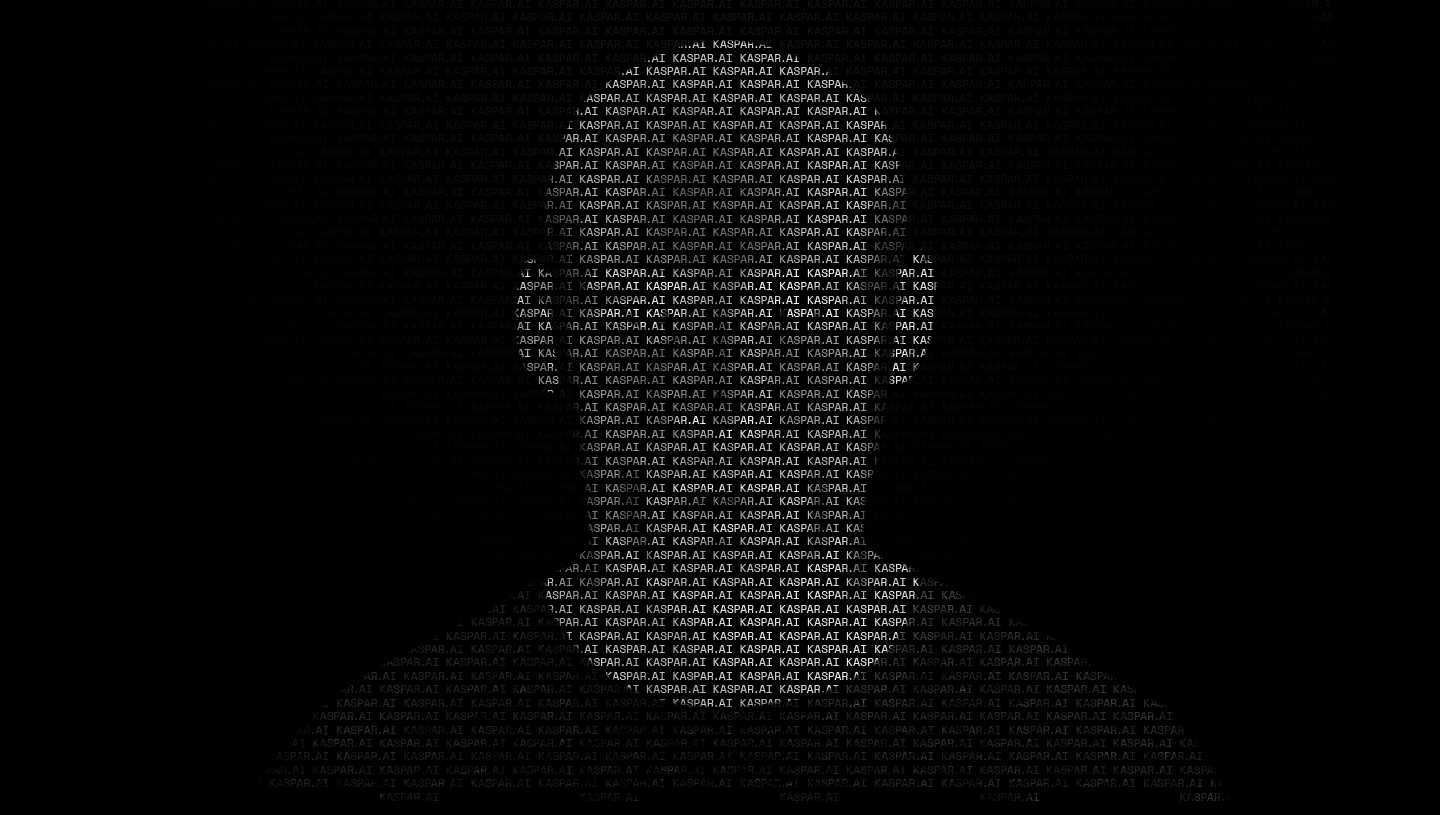
<style>
.page{position:relative;width:1440px;height:815px;background:#000000}
.page>*{position:absolute;margin:0}
.t1{font:11.2px "SpaceMono-Regular";color:#050505;text-transform:uppercase}
</style>
<div class="page">
<p class="t1" style="left:0px;top:0px;width:1440px;height:801px;text-align:justify">Kaspar.ai Kaspar.ai Kaspar.ai Kaspar.ai Kaspar.ai Kaspar.ai Kaspar.ai Kaspar.ai Kaspar.ai Kaspar.ai Kaspar.ai Kaspar.ai Kaspar.ai Kaspar.ai Kaspar.ai Kaspar.ai Kaspar.ai Kaspar.ai Kaspar.ai Kaspar.ai Kaspar.ai Kaspar.ai Kaspar.ai Kaspar.ai Kaspar.ai Kaspar.ai Kaspar.ai Kaspar.ai Kaspar.ai Kaspar.ai Kaspar.ai Kaspar.ai Kaspar.ai Kaspar.ai Kaspar.ai Kaspar.ai Kaspar.ai Kaspar.ai Kaspar.ai Kaspar.ai Kaspar.ai Kaspar.ai Kaspar.ai Kaspar.ai Kaspar.ai Kaspar.ai Kaspar.ai Kaspar.ai Kaspar.ai Kaspar.ai Kaspar.ai Kaspar.ai Kaspar.ai Kaspar.ai Kaspar.ai Kaspar.ai Kaspar.ai Kaspar.ai Kaspar.ai Kaspar.ai Kaspar.ai Kaspar.ai Kaspar.ai Kaspar.ai Kaspar.ai Kaspar.ai Kaspar.ai Kaspar.ai Kaspar.ai Kaspar.ai Kaspar.ai Kaspar.ai Kaspar.ai Kaspar.ai Kaspar.ai Kaspar.ai Kaspar.ai Kaspar.ai Kaspar.ai Kaspar.ai Kaspar.ai Kaspar.ai Kaspar.ai Kaspar.ai Kaspar.ai Kaspar.ai Kaspar.ai Kaspar.ai Kaspar.ai Kaspar.ai Kaspar.ai Kaspar.ai Kaspar.ai Kaspar.ai Kaspar.ai Kaspar.ai Kaspar.ai Kaspar.ai Kaspar.ai Kaspar.ai Kaspar.ai Kaspar.ai Kaspar.ai Kaspar.ai Kaspar.ai Kaspar.ai Kaspar.ai Kaspar.ai Kaspar.ai Kaspar.ai Kaspar.ai Kaspar.ai Kaspar.ai Kaspar.ai Kaspar.ai Kaspar.ai Kaspar.ai Kaspar.ai Kaspar.ai Kaspar.ai Kaspar.ai Kaspar.ai Kaspar.ai Kaspar.ai Kaspar.ai Kaspar.ai Kaspar.ai Kaspar.ai Kaspar.ai Kaspar.ai Kaspar.ai Kaspar.ai Kaspar.ai Kaspar.ai Kaspar.ai Kaspar.ai Kaspar.ai Kaspar.ai Kaspar.ai Kaspar.ai Kaspar.ai Kaspar.ai Kaspar.ai Kaspar.ai Kaspar.ai Kaspar.ai Kaspar.ai Kaspar.ai Kaspar.ai Kaspar.ai Kaspar.ai Kaspar.ai Kaspar.ai Kaspar.ai Kaspar.ai Kaspar.ai Kaspar.ai Kaspar.ai Kaspar.ai Kaspar.ai Kaspar.ai Kaspar.ai Kaspar.ai Kaspar.ai Kaspar.ai Kaspar.ai Kaspar.ai Kaspar.ai Kaspar.ai Kaspar.ai Kaspar.ai Kaspar.ai Kaspar.ai Kaspar.ai Kaspar.ai Kaspar.ai Kaspar.ai Kaspar.ai Kaspar.ai Kaspar.ai Kaspar.ai Kaspar.ai Kaspar.ai Kaspar.ai Kaspar.ai Kaspar.ai Kaspar.ai Kaspar.ai Kaspar.ai Kaspar.ai Kaspar.ai Kaspar.ai Kaspar.ai Kaspar.ai Kaspar.ai Kaspar.ai Kaspar.ai Kaspar.ai Kaspar.ai Kaspar.ai Kaspar.ai Kaspar.ai Kaspar.ai Kaspar.ai Kaspar.ai Kaspar.ai Kaspar.ai Kaspar.ai Kaspar.ai Kaspar.ai Kaspar.ai Kaspar.ai Kaspar.ai Kaspar.ai Kaspar.ai Kaspar.ai Kaspar.ai Kaspar.ai Kaspar.ai Kaspar.ai Kaspar.ai Kaspar.ai Kaspar.ai Kaspar.ai Kaspar.ai Kaspar.ai Kaspar.ai Kaspar.ai Kaspar.ai Kaspar.ai Kaspar.ai Kaspar.ai Kaspar.ai Kaspar.ai Kaspar.ai Kaspar.ai Kaspar.ai Kaspar.ai Kaspar.ai Kaspar.ai Kaspar.ai Kaspar.ai Kaspar.ai Kaspar.ai Kaspar.ai Kaspar.ai Kaspar.ai Kaspar.ai Kaspar.ai Kaspar.ai Kaspar.ai Kaspar.ai Kaspar.ai Kaspar.ai Kaspar.ai Kaspar.ai Kaspar.ai Kaspar.ai Kaspar.ai Kaspar.ai Kaspar.ai Kaspar.ai Kaspar.ai Kaspar.ai Kaspar.ai Kaspar.ai Kaspar.ai Kaspar.ai Kaspar.ai Kaspar.ai Kaspar.ai Kaspar.ai Kaspar.ai Kaspar.ai Kaspar.ai Kaspar.ai Kaspar.ai Kaspar.ai Kaspar.ai Kaspar.ai Kaspar.ai Kaspar.ai Kaspar.ai Kaspar.ai Kaspar.ai Kaspar.ai Kaspar.ai Kaspar.ai Kaspar.ai Kaspar.ai Kaspar.ai Kaspar.ai Kaspar.ai Kaspar.ai Kaspar.ai Kaspar.ai Kaspar.ai Kaspar.ai Kaspar.ai Kaspar.ai Kaspar.ai Kaspar.ai Kaspar.ai Kaspar.ai Kaspar.ai Kaspar.ai Kaspar.ai Kaspar.ai Kaspar.ai Kaspar.ai Kaspar.ai Kaspar.ai Kaspar.ai Kaspar.ai Kaspar.ai Kaspar.ai Kaspar.ai Kaspar.ai Kaspar.ai Kaspar.ai Kaspar.ai Kaspar.ai Kaspar.ai Kaspar.ai Kaspar.ai Kaspar.ai Kaspar.ai Kaspar.ai Kaspar.ai Kaspar.ai Kaspar.ai Kaspar.ai Kaspar.ai Kaspar.ai Kaspar.ai Kaspar.ai Kaspar.ai Kaspar.ai Kaspar.ai Kaspar.ai Kaspar.ai Kaspar.ai Kaspar.ai Kaspar.ai Kaspar.ai Kaspar.ai Kaspar.ai Kaspar.ai Kaspar.ai Kaspar.ai Kaspar.ai Kaspar.ai Kaspar.ai Kaspar.ai Kaspar.ai Kaspar.ai Kaspar.ai Kaspar.ai Kaspar.ai Kaspar.ai Kaspar.ai Kaspar.ai Kaspar.ai Kaspar.ai Kaspar.ai Kaspar.ai Kaspar.ai Kaspar.ai Kaspar.ai Kaspar.ai Kaspar.ai Kaspar.ai Kaspar.ai Kaspar.ai Kaspar.ai Kaspar.ai Kaspar.ai Kaspar.ai Kaspar.ai Kaspar.ai Kaspar.ai Kaspar.ai Kaspar.ai Kaspar.ai Kaspar.ai Kaspar.ai Kaspar.ai Kaspar.ai Kaspar.ai Kaspar.ai Kaspar.ai Kaspar.ai Kaspar.ai Kaspar.ai Kaspar.ai Kaspar.ai Kaspar.ai Kaspar.ai Kaspar.ai Kaspar.ai Kaspar.ai Kaspar.ai Kaspar.ai Kaspar.ai Kaspar.ai Kaspar.ai Kaspar.ai Kaspar.ai Kaspar.ai Kaspar.ai Kaspar.ai Kaspar.ai Kaspar.ai Kaspar.ai Kaspar.ai Kaspar.ai Kaspar.ai Kaspar.ai Kaspar.ai Kaspar.ai Kaspar.ai Kaspar.ai Kaspar.ai Kaspar.ai Kaspar.ai Kaspar.ai Kaspar.ai Kaspar.ai Kaspar.ai Kaspar.ai Kaspar.ai Kaspar.ai Kaspar.ai Kaspar.ai Kaspar.ai Kaspar.ai Kaspar.ai Kaspar.ai Kaspar.ai Kaspar.ai Kaspar.ai Kaspar.ai Kaspar.ai Kaspar.ai Kaspar.ai Kaspar.ai Kaspar.ai Kaspar.ai Kaspar.ai Kaspar.ai Kaspar.ai Kaspar.ai Kaspar.ai Kaspar.ai Kaspar.ai Kaspar.ai Kaspar.ai Kaspar.ai Kaspar.ai Kaspar.ai Kaspar.ai Kaspar.ai Kaspar.ai Kaspar.ai Kaspar.ai Kaspar.ai Kaspar.ai Kaspar.ai Kaspar.ai Kaspar.ai Kaspar.ai Kaspar.ai Kaspar.ai Kaspar.ai Kaspar.ai Kaspar.ai Kaspar.ai Kaspar.ai Kaspar.ai Kaspar.ai Kaspar.ai Kaspar.ai Kaspar.ai Kaspar.ai Kaspar.ai Kaspar.ai Kaspar.ai Kaspar.ai Kaspar.ai Kaspar.ai Kaspar.ai Kaspar.ai Kaspar.ai Kaspar.ai Kaspar.ai Kaspar.ai Kaspar.ai Kaspar.ai Kaspar.ai Kaspar.ai Kaspar.ai Kaspar.ai Kaspar.ai Kaspar.ai Kaspar.ai Kaspar.ai Kaspar.ai Kaspar.ai Kaspar.ai Kaspar.ai Kaspar.ai Kaspar.ai Kaspar.ai Kaspar.ai Kaspar.ai Kaspar.ai Kaspar.ai Kaspar.ai Kaspar.ai Kaspar.ai Kaspar.ai Kaspar.ai Kaspar.ai Kaspar.ai Kaspar.ai Kaspar.ai Kaspar.ai Kaspar.ai Kaspar.ai Kaspar.ai Kaspar.ai Kaspar.ai Kaspar.ai Kaspar.ai Kaspar.ai Kaspar.ai Kaspar.ai Kaspar.ai Kaspar.ai Kaspar.ai Kaspar.ai Kaspar.ai Kaspar.ai Kaspar.ai Kaspar.ai Kaspar.ai Kaspar.ai Kaspar.ai Kaspar.ai Kaspar.ai Kaspar.ai Kaspar.ai Kaspar.ai Kaspar.ai Kaspar.ai Kaspar.ai Kaspar.ai Kaspar.ai Kaspar.ai Kaspar.ai Kaspar.ai Kaspar.ai Kaspar.ai Kaspar.ai Kaspar.ai Kaspar.ai Kaspar.ai Kaspar.ai Kaspar.ai Kaspar.ai Kaspar.ai Kaspar.ai Kaspar.ai Kaspar.ai Kaspar.ai Kaspar.ai Kaspar.ai Kaspar.ai Kaspar.ai Kaspar.ai Kaspar.ai Kaspar.ai Kaspar.ai Kaspar.ai Kaspar.ai Kaspar.ai Kaspar.ai Kaspar.ai Kaspar.ai Kaspar.ai Kaspar.ai Kaspar.ai Kaspar.ai Kaspar.ai Kaspar.ai Kaspar.ai Kaspar.ai Kaspar.ai Kaspar.ai Kaspar.ai Kaspar.ai Kaspar.ai Kaspar.ai Kaspar.ai Kaspar.ai Kaspar.ai Kaspar.ai Kaspar.ai Kaspar.ai Kaspar.ai Kaspar.ai Kaspar.ai Kaspar.ai Kaspar.ai Kaspar.ai Kaspar.ai Kaspar.ai Kaspar.ai Kaspar.ai Kaspar.ai Kaspar.ai Kaspar.ai Kaspar.ai Kaspar.ai Kaspar.ai Kaspar.ai Kaspar.ai Kaspar.ai Kaspar.ai Kaspar.ai Kaspar.ai Kaspar.ai Kaspar.ai Kaspar.ai Kaspar.ai Kaspar.ai Kaspar.ai Kaspar.ai Kaspar.ai Kaspar.ai Kaspar.ai Kaspar.ai Kaspar.ai Kaspar.ai Kaspar.ai Kaspar.ai Kaspar.ai Kaspar.ai Kaspar.ai Kaspar.ai Kaspar.ai Kaspar.ai Kaspar.ai Kaspar.ai Kaspar.ai Kaspar.ai Kaspar.ai Kaspar.ai Kaspar.ai Kaspar.ai Kaspar.ai Kaspar.ai Kaspar.ai Kaspar.ai Kaspar.ai Kaspar.ai Kaspar.ai Kaspar.ai Kaspar.ai Kaspar.ai Kaspar.ai Kaspar.ai Kaspar.ai Kaspar.ai Kaspar.ai Kaspar.ai Kaspar.ai Kaspar.ai Kaspar.ai Kaspar.ai Kaspar.ai Kaspar.ai Kaspar.ai Kaspar.ai Kaspar.ai Kaspar.ai Kaspar.ai Kaspar.ai Kaspar.ai Kaspar.ai Kaspar.ai Kaspar.ai Kaspar.ai Kaspar.ai Kaspar.ai Kaspar.ai Kaspar.ai Kaspar.ai Kaspar.ai Kaspar.ai Kaspar.ai Kaspar.ai Kaspar.ai Kaspar.ai Kaspar.ai Kaspar.ai Kaspar.ai Kaspar.ai Kaspar.ai Kaspar.ai Kaspar.ai Kaspar.ai Kaspar.ai Kaspar.ai Kaspar.ai Kaspar.ai Kaspar.ai Kaspar.ai Kaspar.ai Kaspar.ai Kaspar.ai Kaspar.ai Kaspar.ai Kaspar.ai Kaspar.ai Kaspar.ai Kaspar.ai Kaspar.ai Kaspar.ai Kaspar.ai Kaspar.ai Kaspar.ai Kaspar.ai Kaspar.ai Kaspar.ai Kaspar.ai Kaspar.ai Kaspar.ai Kaspar.ai Kaspar.ai Kaspar.ai Kaspar.ai Kaspar.ai Kaspar.ai Kaspar.ai Kaspar.ai Kaspar.ai Kaspar.ai Kaspar.ai Kaspar.ai Kaspar.ai Kaspar.ai Kaspar.ai Kaspar.ai Kaspar.ai Kaspar.ai Kaspar.ai Kaspar.ai Kaspar.ai Kaspar.ai Kaspar.ai Kaspar.ai Kaspar.ai Kaspar.ai Kaspar.ai Kaspar.ai Kaspar.ai Kaspar.ai Kaspar.ai Kaspar.ai Kaspar.ai Kaspar.ai Kaspar.ai Kaspar.ai Kaspar.ai Kaspar.ai Kaspar.ai Kaspar.ai Kaspar.ai Kaspar.ai Kaspar.ai Kaspar.ai Kaspar.ai Kaspar.ai Kaspar.ai Kaspar.ai Kaspar.ai Kaspar.ai Kaspar.ai Kaspar.ai Kaspar.ai Kaspar.ai Kaspar.ai Kaspar.ai Kaspar.ai Kaspar.ai Kaspar.ai Kaspar.ai Kaspar.ai Kaspar.ai Kaspar.ai Kaspar.ai Kaspar.ai Kaspar.ai Kaspar.ai Kaspar.ai Kaspar.ai Kaspar.ai Kaspar.ai Kaspar.ai Kaspar.ai Kaspar.ai Kaspar.ai Kaspar.ai Kaspar.ai Kaspar.ai Kaspar.ai Kaspar.ai Kaspar.ai Kaspar.ai Kaspar.ai Kaspar.ai Kaspar.ai Kaspar.ai Kaspar.ai Kaspar.ai Kaspar.ai Kaspar.ai Kaspar.ai Kaspar.ai Kaspar.ai Kaspar.ai Kaspar.ai Kaspar.ai Kaspar.ai Kaspar.ai Kaspar.ai Kaspar.ai Kaspar.ai Kaspar.ai Kaspar.ai Kaspar.ai Kaspar.ai Kaspar.ai Kaspar.ai Kaspar.ai Kaspar.ai Kaspar.ai Kaspar.ai Kaspar.ai Kaspar.ai Kaspar.ai Kaspar.ai Kaspar.ai Kaspar.ai Kaspar.ai Kaspar.ai Kaspar.ai Kaspar.ai Kaspar.ai Kaspar.ai Kaspar.ai Kaspar.ai Kaspar.ai Kaspar.ai Kaspar.ai Kaspar.ai Kaspar.ai Kaspar.ai Kaspar.ai Kaspar.ai Kaspar.ai Kaspar.ai Kaspar.ai Kaspar.ai Kaspar.ai Kaspar.ai Kaspar.ai Kaspar.ai Kaspar.ai Kaspar.ai Kaspar.ai Kaspar.ai Kaspar.ai Kaspar.ai Kaspar.ai Kaspar.ai Kaspar.ai Kaspar.ai Kaspar.ai Kaspar.ai Kaspar.ai Kaspar.ai Kaspar.ai Kaspar.ai Kaspar.ai Kaspar.ai Kaspar.ai Kaspar.ai Kaspar.ai Kaspar.ai Kaspar.ai Kaspar.ai Kaspar.ai Kaspar.ai Kaspar.ai Kaspar.ai Kaspar.ai Kaspar.ai Kaspar.ai Kaspar.ai Kaspar.ai Kaspar.ai Kaspar.ai Kaspar.ai Kaspar.ai Kaspar.ai Kaspar.ai Kaspar.ai Kaspar.ai Kaspar.ai Kaspar.ai Kaspar.ai Kaspar.ai Kaspar.ai Kaspar.ai Kaspar.ai Kaspar.ai Kaspar.ai Kaspar.ai Kaspar.ai Kaspar.ai Kaspar.ai Kaspar.ai Kaspar.ai Kaspar.ai Kaspar.ai Kaspar.ai Kaspar.ai Kaspar.ai Kaspar.ai Kaspar.ai Kaspar.ai Kaspar.ai Kaspar.ai Kaspar.ai Kaspar.ai Kaspar.ai Kaspar.ai Kaspar.ai Kaspar.ai Kaspar.ai Kaspar.ai Kaspar.ai Kaspar.ai Kaspar.ai Kaspar.ai Kaspar.ai Kaspar.ai Kaspar.ai Kaspar.ai Kaspar.ai Kaspar.ai Kaspar.ai Kaspar.ai Kaspar.ai Kaspar.ai Kaspar.ai Kaspar.ai Kaspar.ai Kaspar.ai Kaspar.ai Kaspar.ai Kaspar.ai Kaspar.ai Kaspar.ai Kaspar.ai Kaspar.ai Kaspar.ai Kaspar.ai Kaspar.ai Kaspar.ai Kaspar.ai Kaspar.ai Kaspar.ai Kaspar.ai Kaspar.ai Kaspar.ai Kaspar.ai Kaspar.ai Kaspar.ai Kaspar.ai Kaspar.ai Kaspar.ai Kaspar.ai Kaspar.ai Kaspar.ai Kaspar.ai Kaspar.ai Kaspar.ai Kaspar.ai Kaspar.ai Kaspar.ai Kaspar.ai Kaspar.ai Kaspar.ai Kaspar.ai Kaspar.ai Kaspar.ai Kaspar.ai Kaspar.ai Kaspar.ai Kaspar.ai Kaspar.ai Kaspar.ai Kaspar.ai Kaspar.ai Kaspar.ai Kaspar.ai Kaspar.ai Kaspar.ai Kaspar.ai Kaspar.ai Kaspar.ai Kaspar.ai Kaspar.ai Kaspar.ai Kaspar.ai Kaspar.ai Kaspar.ai Kaspar.ai Kaspar.ai Kaspar.ai Kaspar.ai Kaspar.ai Kaspar.ai Kaspar.ai Kaspar.ai Kaspar.ai Kaspar.ai Kaspar.ai Kaspar.ai Kaspar.ai Kaspar.ai Kaspar.ai Kaspar.ai Kaspar.ai Kaspar.ai Kaspar.ai Kaspar.ai Kaspar.ai Kaspar.ai Kaspar.ai Kaspar.ai Kaspar.ai Kaspar.ai Kaspar.ai Kaspar.ai Kaspar.ai Kaspar.ai Kaspar.ai Kaspar.ai Kaspar.ai Kaspar.ai Kaspar.ai Kaspar.ai Kaspar.ai Kaspar.ai Kaspar.ai Kaspar.ai Kaspar.ai Kaspar.ai Kaspar.ai Kaspar.ai Kaspar.ai Kaspar.ai Kaspar.ai Kaspar.ai Kaspar.ai Kaspar.ai Kaspar.ai Kaspar.ai Kaspar.ai Kaspar.ai Kaspar.ai Kaspar.ai Kaspar.ai Kaspar.ai Kaspar.ai Kaspar.ai Kaspar.ai Kaspar.ai Kaspar.ai Kaspar.ai Kaspar.ai Kaspar.ai Kaspar.ai Kaspar.ai Kaspar.ai Kaspar.ai Kaspar.ai Kaspar.ai Kaspar.ai Kaspar.ai Kaspar.ai Kaspar.ai Kaspar.ai Kaspar.ai Kaspar.ai Kaspar.ai Kaspar.ai Kaspar.ai Kaspar.ai Kaspar.ai Kaspar.ai Kaspar.ai Kaspar.ai Kaspar.ai Kaspar.ai Kaspar.ai Kaspar.ai Kaspar.ai Kaspar.ai Kaspar.ai Kaspar.ai Kaspar.ai Kaspar.ai Kaspar.ai Kaspar.ai Kaspar.ai Kaspar.ai Kaspar.ai Kaspar.ai Kaspar.ai Kaspar.ai Kaspar.ai Kaspar.ai Kaspar.ai Kaspar.ai Kaspar.ai Kaspar.ai Kaspar.ai Kaspar.ai Kaspar.ai Kaspar.ai Kaspar.ai Kaspar.ai Kaspar.ai Kaspar.ai Kaspar.ai Kaspar.ai Kaspar.ai Kaspar.ai Kaspar.ai Kaspar.ai Kaspar.ai Kaspar.ai Kaspar.ai Kaspar.ai Kaspar.ai Kaspar.ai Kaspar.ai Kaspar.ai Kaspar.ai Kaspar.ai Kaspar.ai Kaspar.ai Kaspar.ai Kaspar.ai Kaspar.ai Kaspar.ai Kaspar.ai Kaspar.ai Kaspar.ai Kaspar.ai Kaspar.ai Kaspar.ai Kaspar.ai Kaspar.ai Kaspar.ai Kaspar.ai Kaspar.ai Kaspar.ai Kaspar.ai Kaspar.ai Kaspar.ai Kaspar.ai Kaspar.ai Kaspar.ai Kaspar.ai Kaspar.ai Kaspar.ai Kaspar.ai Kaspar.ai Kaspar.ai Kaspar.ai Kaspar.ai Kaspar.ai Kaspar.ai Kaspar.ai Kaspar.ai Kaspar.ai Kaspar.ai Kaspar.ai Kaspar.ai Kaspar.ai Kaspar.ai Kaspar.ai Kaspar.ai Kaspar.ai Kaspar.ai Kaspar.ai Kaspar.ai Kaspar.ai Kaspar.ai Kaspar.ai Kaspar.ai Kaspar.ai Kaspar.ai Kaspar.ai Kaspar.ai Kaspar.ai Kaspar.ai Kaspar.ai Kaspar.ai Kaspar.ai Kaspar.ai Kaspar.ai Kaspar.ai Kaspar.ai Kaspar.ai Kaspar.ai Kaspar.ai Kaspar.ai Kaspar.ai Kaspar.ai Kaspar.ai Kaspar.ai Kaspar.ai Kaspar.ai Kaspar.ai Kaspar.ai Kaspar.ai Kaspar.ai Kaspar.ai Kaspar.ai Kaspar.ai Kaspar.ai Kaspar.ai Kaspar.ai Kaspar.ai Kaspar.ai Kaspar.ai Kaspar.ai Kaspar.ai Kaspar.ai Kaspar.ai Kaspar.ai Kaspar.ai Kaspar.ai Kaspar.ai Kaspar.ai Kaspar.ai Kaspar.ai Kaspar.ai Kaspar.ai Kaspar.ai Kaspar.ai Kaspar.ai Kaspar.ai Kaspar.ai Kaspar.ai Kaspar.ai Kaspar.ai Kaspar.ai Kaspar.ai</p>
</div>
